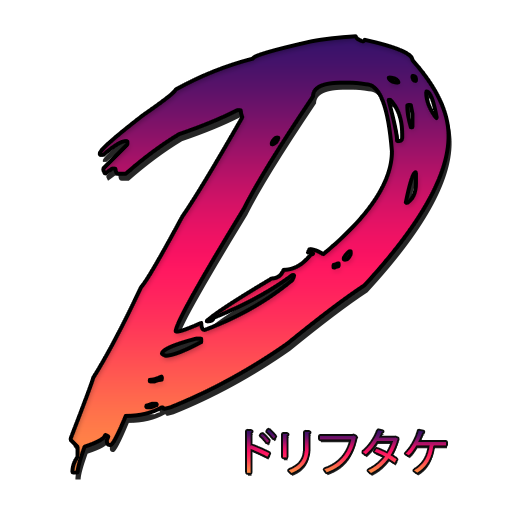
<style>
.page{position:relative;width:512px;height:512px;background:#ffffff}
.page>*{position:absolute;margin:0}
.t1{font:420px "TrueLies"}
.t2{font:48px "KozGoPr6N-Regular"}
</style>
<div class="page">
<p class="t1" style="left:70px;top:36px;width:379px;height:437px">D</p>
<p class="t2" style="left:247px;top:429px;width:199px;height:44px">ドリフタケ</p>
</div>
